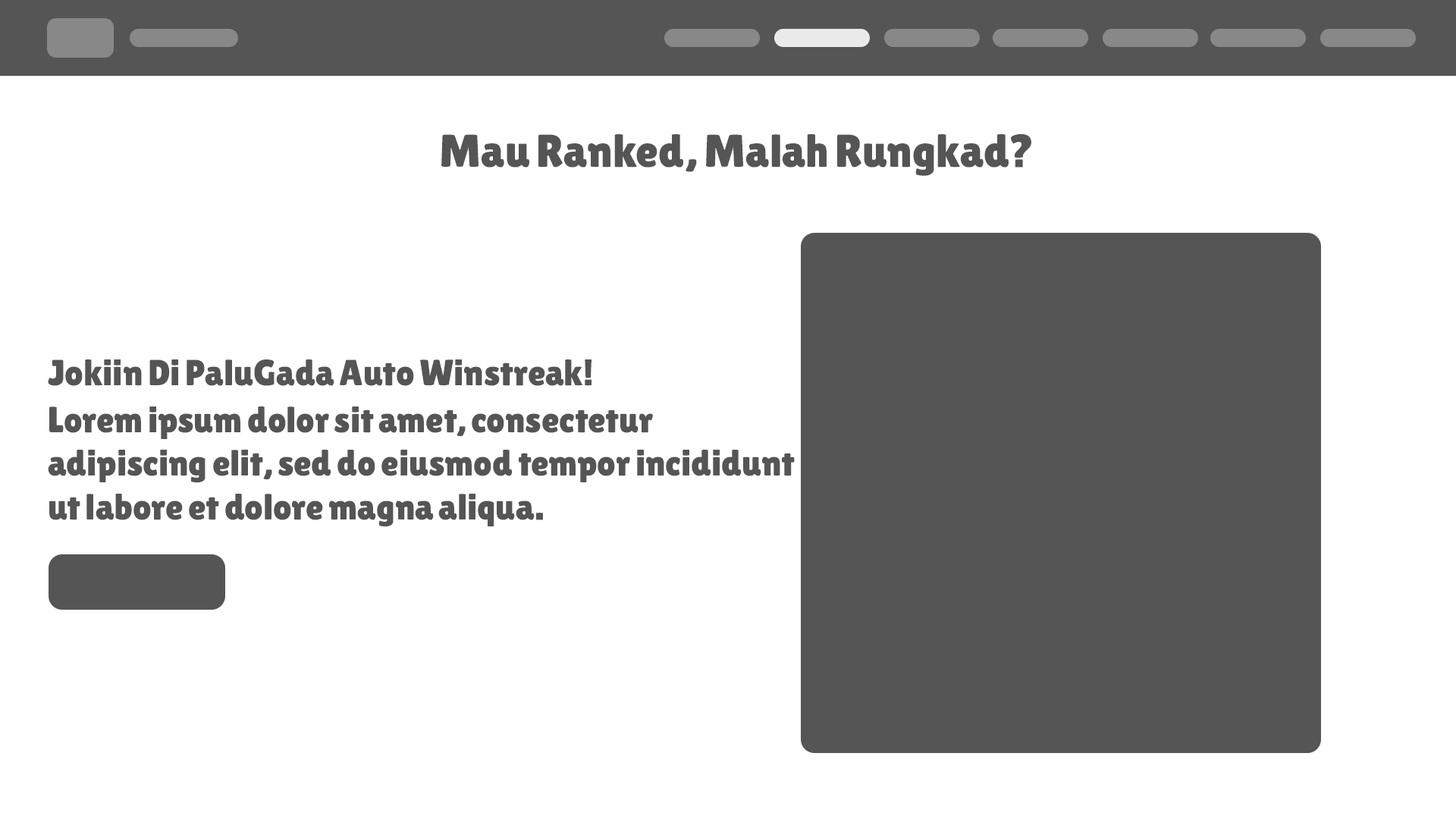
<style>
.page{position:relative;width:1456px;height:819px;background:#ffffff}
.page>*{position:absolute;margin:0}
.t1{font:46.1px "LilitaOne";letter-spacing:-0.025em;color:#555555}
.t2{font:36.4px "LilitaOne";letter-spacing:-0.025em;color:#555555}
</style>
<div class="page">
<p class="t1" style="left:441px;top:133px;width:590px;height:43px">Mau Ranked, Malah Rungkad?</p>
<p class="t2" style="left:48px;top:359px;width:543px;height:27px">Jokiin Di PaluGada Auto Winstreak!</p>
<p class="t2" style="left:48px;top:406px;width:747px;height:121px">Lorem ipsum dolor sit amet, consectetur <br>adipiscing elit, sed do eiusmod tempor incididunt<br>ut labore et dolore magna aliqua.</p>
</div>
